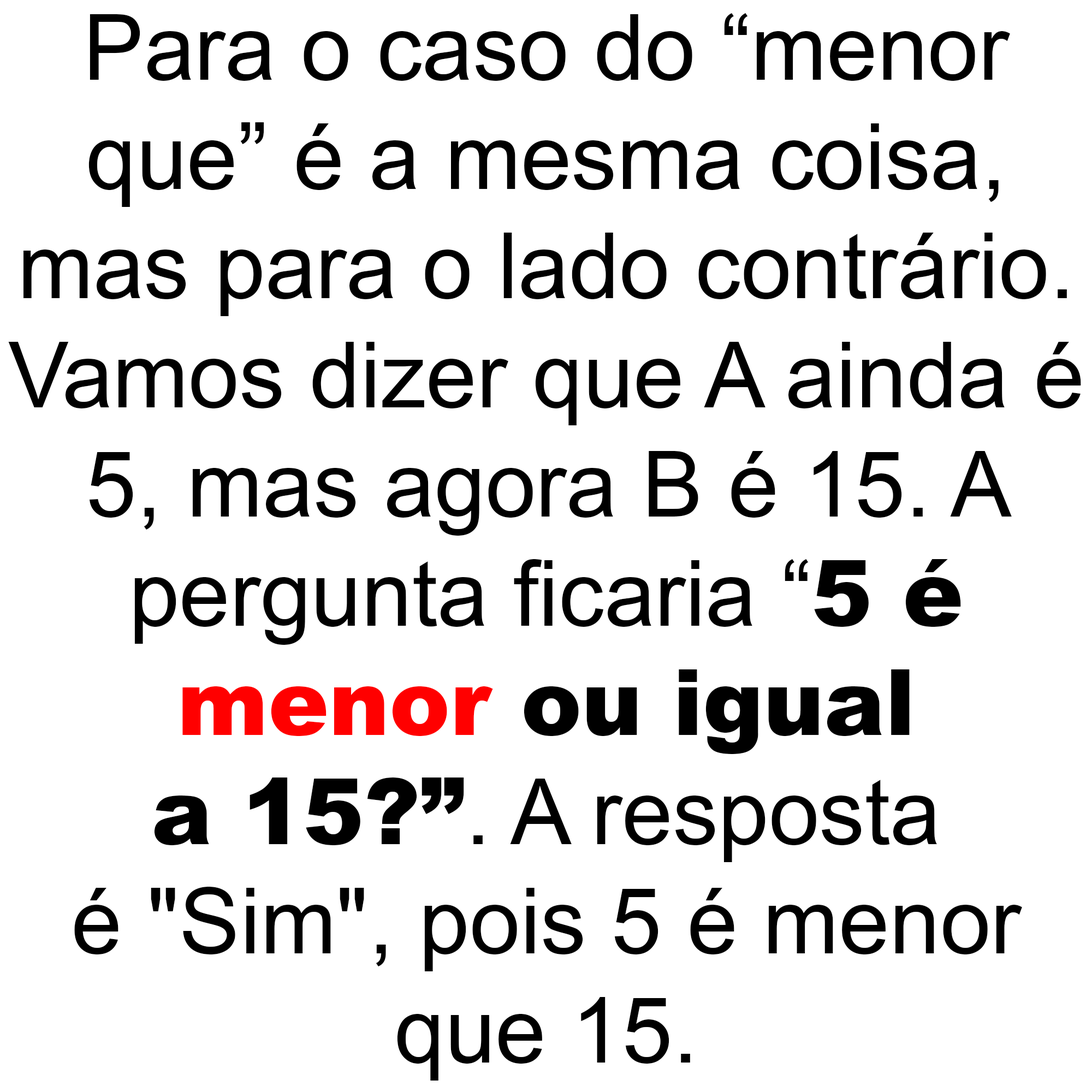
<style>
.page{position:relative;width:1092px;height:1092px;background:#ffffff}
.page>*{position:absolute;margin:0}
.t1{font:91px "ArialMT";color:#000000}
.t2{font:91px "Arial-Black";color:#000000}
.t3{font:91px "Arial-Black";color:#ff0000}
</style>
<div class="page">
<p class="t1" style="left:8px;top:13px;width:1073px;height:1068px;text-align:center">Para o caso do “menor<br>que” é a mesma coisa,<br>mas para o lado contrário.<br>Vamos dizer que A ainda é<br>5, mas agora B é 15. A<br>pergunta ficaria “<span class="t2">5 é<br></span><span class="t3">menor</span><span class="t2"> ou igual<br>a 15?”</span>. A resposta<br>é "Sim", pois 5 é menor<br>que 15.</p>
</div>
